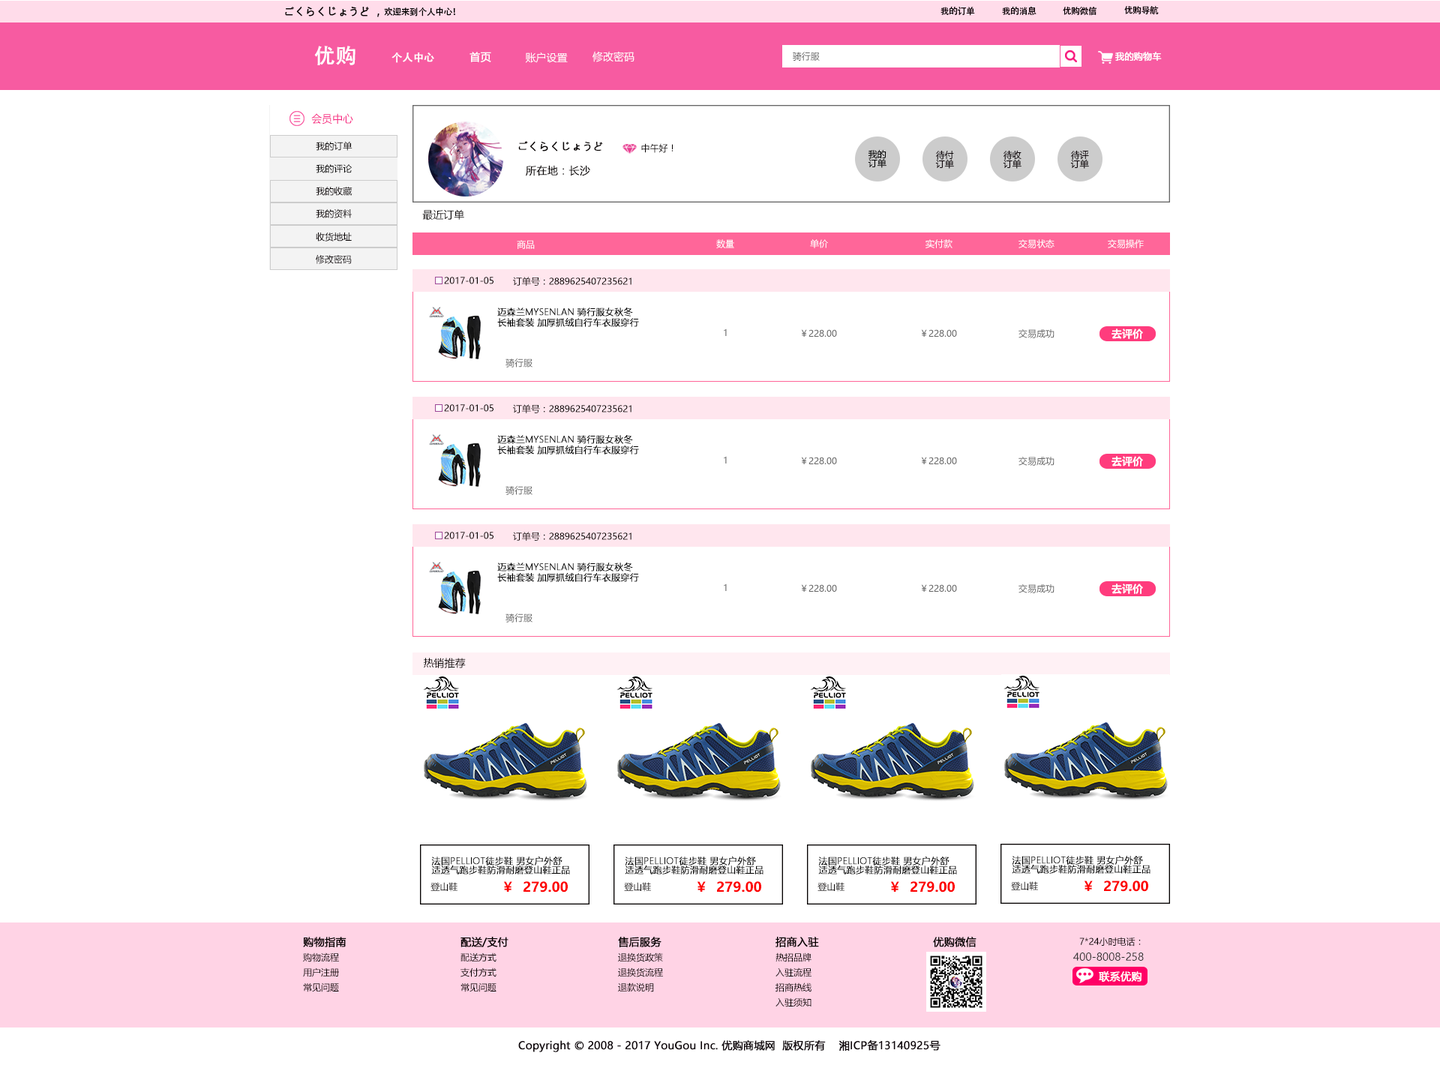
<style>
.page{position:relative;width:1440px;height:1065px;background:#ffffff}
.page>*{position:absolute;margin:0}
.t1{font:8.8px "AdobeHeitiStd-Regular";letter-spacing:-0.025em;color:#000000}
.t2{font:10.5px "MicrosoftYaHei";color:#040000;font-weight:bold}
.t3{font:21px "AdobeHeitiStd-Regular";color:#ffffff;font-weight:bold}
.t4{font:10.5px "AdobeHeitiStd-Regular";color:#ffffff;font-weight:bold}
.t5{font:10.5px "MicrosoftYaHei";color:#ffffff;font-weight:bold}
.t6{font:10.5px "MicrosoftYaHei";color:#ffffff}
.t7{font:9px "MicrosoftYaHei";color:#666666}
.t8{font:9px "MicrosoftYaHei";color:#ffffff;font-weight:bold}
.t9{font:10.5px "MicrosoftYaHei";color:#f72985}
.t10{font:9px "MicrosoftYaHei";color:#040000}
.t11{font:9px/9px "MicrosoftYaHei";color:#000000}
.t12{font:9px/9px "MicrosoftYaHei";color:#0e050a}
.t13{font:9px "MicrosoftYaHei";color:#000000}
.t14{font:10.5px "MicrosoftYaHeiLight";color:#040000;font-weight:bold}
.t15{font:9px "MicrosoftYaHei";color:#060001}
.t16{font:10.5px "MicrosoftYaHei";color:#040000}
.t17{font:9px "MicrosoftYaHei";color:#ffffff}
.t18{font:9px/10.5px "MicrosoftYaHeiLight";color:#000000;font-weight:bold}
.t19{font:9px "MicrosoftYaHei"}
.t20{font:10.5px "MicrosoftYaHei-Bold";color:#ffffff}
.t21{font:9px/9px "MicrosoftYaHeiLight";color:#000000;font-weight:bold}
.t22{font:13.5px "MicrosoftYaHei-Bold";color:#fd0000}
.t23{font:10.5px "MicrosoftYaHei";color:#323333}
.t24{font:10.5px "MicrosoftYaHei";color:#0e050a;font-weight:bold}
</style>
<div class="page">
<p class="t1" style="left:940px;top:6px;width:35px;height:10px">我的订单</p>
<p class="t1" style="left:1002px;top:6px;width:34px;height:9px">我的消息</p>
<p class="t1" style="left:1063px;top:6px;width:33px;height:10px">优购微信</p>
<p class="t1" style="left:1124px;top:6px;width:35px;height:9px">优购导航</p>
<p class="t2" style="left:285px;top:7px;width:170px;height:10px">ごくらくじょうど ，<span class="t1">欢迎来到个人中心！</span></p>
<p class="t3" style="left:314px;top:46px;width:42px;height:19px">优购</p>
<p class="t4" style="left:392px;top:52px;width:42px;height:11px">个人中心</p>
<p class="t5" style="left:470px;top:52px;width:21px;height:10px">首页</p>
<p class="t6" style="left:525px;top:52px;width:43px;height:11px">账户设置</p>
<p class="t6" style="left:592px;top:51px;width:42px;height:11px">修改密码</p>
<p class="t7" style="left:793px;top:52px;width:27px;height:9px">骑行服</p>
<p class="t8" style="left:1115px;top:52px;width:47px;height:10px">我的购物车</p>
<p class="t9" style="left:311px;top:113px;width:42px;height:11px">会员中心</p>
<p class="t10" style="left:316px;top:141px;width:36px;height:10px">我的订单</p>
<p class="t2" style="left:518px;top:141px;width:85px;height:11px">ごくらくじょうど</p>
<p class="t10" style="left:641px;top:143px;width:33px;height:10px">中午好！</p>
<p class="t11" style="left:868px;top:150px;width:18px;height:18px">我的<br>订单</p>
<p class="t11" style="left:935px;top:150px;width:19px;height:19px">待付<br>订单</p>
<p class="t12" style="left:1003px;top:150px;width:19px;height:19px">待收<br>订单</p>
<p class="t12" style="left:1070px;top:150px;width:19px;height:19px">待评<br>订单</p>
<p class="t13" style="left:316px;top:164px;width:36px;height:9px">我的评论</p>
<p class="t14" style="left:526px;top:165px;width:64px;height:11px">所在地：长沙</p>
<p class="t15" style="left:316px;top:187px;width:36px;height:9px">我的收藏</p>
<p class="t15" style="left:316px;top:208px;width:36px;height:10px">我的资料</p>
<p class="t16" style="left:422px;top:209px;width:42px;height:11px">最近订单</p>
<p class="t15" style="left:316px;top:232px;width:36px;height:10px">收货地址</p>
<p class="t17" style="left:517px;top:240px;width:18px;height:9px">商品</p>
<p class="t17" style="left:716px;top:239px;width:18px;height:9px">数量</p>
<p class="t17" style="left:810px;top:239px;width:18px;height:9px">单价</p>
<p class="t17" style="left:926px;top:239px;width:26px;height:9px">实付款</p>
<p class="t17" style="left:1018px;top:239px;width:36px;height:9px">交易状态</p>
<p class="t17" style="left:1108px;top:239px;width:36px;height:9px">交易操作</p>
<p class="t15" style="left:316px;top:255px;width:36px;height:9px">修改密码</p>
<p class="t10" style="left:444px;top:277px;width:50px;height:7px">2017-01-05</p>
<p class="t10" style="left:513px;top:277px;width:119px;height:9px">订单号：2889625407235621</p>
<p class="t18" style="left:497px;top:308px;width:142px;height:19px">迈森兰MYSENLAN 骑行服女秋冬<br>长袖套装 加厚抓绒自行车衣服穿行</p>
<p class="t19" style="left:724px;top:328px;width:3px;height:8px">1</p>
<p class="t7" style="left:801px;top:329px;width:36px;height:8px">￥228.00</p>
<p class="t7" style="left:921px;top:329px;width:36px;height:8px">￥228.00</p>
<p class="t7" style="left:1018px;top:329px;width:36px;height:9px">交易成功</p>
<p class="t20" style="left:1112px;top:328px;width:31px;height:11px">去评价</p>
<p class="t7" style="left:506px;top:358px;width:26px;height:10px">骑行服</p>
<p class="t10" style="left:444px;top:404px;width:50px;height:8px">2017-01-05</p>
<p class="t10" style="left:513px;top:404px;width:119px;height:9px">订单号：2889625407235621</p>
<p class="t18" style="left:497px;top:435px;width:142px;height:19px">迈森兰MYSENLAN 骑行服女秋冬<br>长袖套装 加厚抓绒自行车衣服穿行</p>
<p class="t19" style="left:724px;top:456px;width:3px;height:8px">1</p>
<p class="t7" style="left:801px;top:457px;width:36px;height:7px">￥228.00</p>
<p class="t7" style="left:921px;top:457px;width:36px;height:7px">￥228.00</p>
<p class="t7" style="left:1018px;top:457px;width:36px;height:9px">交易成功</p>
<p class="t20" style="left:1112px;top:456px;width:31px;height:10px">去评价</p>
<p class="t7" style="left:506px;top:485px;width:26px;height:10px">骑行服</p>
<p class="t10" style="left:444px;top:532px;width:50px;height:7px">2017-01-05</p>
<p class="t10" style="left:513px;top:532px;width:119px;height:9px">订单号：2889625407235621</p>
<p class="t18" style="left:497px;top:562px;width:142px;height:20px">迈森兰MYSENLAN 骑行服女秋冬<br>长袖套装 加厚抓绒自行车衣服穿行</p>
<p class="t19" style="left:724px;top:584px;width:3px;height:7px">1</p>
<p class="t7" style="left:801px;top:584px;width:36px;height:8px">￥228.00</p>
<p class="t7" style="left:921px;top:584px;width:36px;height:8px">￥228.00</p>
<p class="t7" style="left:1018px;top:584px;width:36px;height:9px">交易成功</p>
<p class="t20" style="left:1112px;top:584px;width:31px;height:10px">去评价</p>
<p class="t7" style="left:506px;top:613px;width:26px;height:9px">骑行服</p>
<p class="t16" style="left:424px;top:658px;width:42px;height:10px">热销推荐</p>
<p class="t21" style="left:431px;top:856px;width:139px;height:18px">法国PELLIOT徒步鞋 男女户外舒<br>适透气跑步鞋防滑耐磨登山鞋正品</p>
<p class="t21" style="left:625px;top:856px;width:139px;height:18px">法国PELLIOT徒步鞋 男女户外舒<br>适透气跑步鞋防滑耐磨登山鞋正品</p>
<p class="t21" style="left:818px;top:856px;width:139px;height:18px">法国PELLIOT徒步鞋 男女户外舒<br>适透气跑步鞋防滑耐磨登山鞋正品</p>
<p class="t21" style="left:1012px;top:856px;width:138px;height:18px">法国PELLIOT徒步鞋 男女户外舒<br>适透气跑步鞋防滑耐磨登山鞋正品</p>
<p class="t22" style="left:503px;top:881px;width:65px;height:11px">￥  279.00</p>
<p class="t22" style="left:697px;top:881px;width:64px;height:11px">￥  279.00</p>
<p class="t22" style="left:890px;top:881px;width:65px;height:11px">￥  279.00</p>
<p class="t10" style="left:1011px;top:881px;width:27px;height:10px">登山鞋</p>
<p class="t22" style="left:1084px;top:880px;width:64px;height:12px">￥  279.00</p>
<p class="t10" style="left:430px;top:882px;width:28px;height:10px">登山鞋</p>
<p class="t10" style="left:624px;top:882px;width:27px;height:10px">登山鞋</p>
<p class="t10" style="left:818px;top:882px;width:26px;height:10px">登山鞋</p>
<p class="t2" style="left:303px;top:937px;width:43px;height:10px">购物指南</p>
<p class="t2" style="left:460px;top:937px;width:48px;height:10px">配送/支付</p>
<p class="t2" style="left:618px;top:937px;width:44px;height:10px">售后服务</p>
<p class="t2" style="left:776px;top:937px;width:43px;height:10px">招商入驻</p>
<p class="t2" style="left:933px;top:937px;width:43px;height:10px">优购微信</p>
<p class="t10" style="left:1079px;top:937px;width:62px;height:9px">7*24小时电话：</p>
<p class="t10" style="left:303px;top:952px;width:36px;height:10px">购物流程</p>
<p class="t10" style="left:460px;top:952px;width:36px;height:10px">配送方式</p>
<p class="t10" style="left:618px;top:952px;width:45px;height:10px">退换货政策</p>
<p class="t10" style="left:776px;top:952px;width:36px;height:10px">热招品牌</p>
<p class="t23" style="left:1073px;top:952px;width:71px;height:9px">400-8008-258</p>
<p class="t10" style="left:303px;top:968px;width:36px;height:9px">用户注册</p>
<p class="t10" style="left:460px;top:968px;width:36px;height:9px">支付方式</p>
<p class="t10" style="left:618px;top:968px;width:45px;height:9px">退换货流程</p>
<p class="t10" style="left:776px;top:968px;width:36px;height:9px">入驻流程</p>
<p class="t5" style="left:1099px;top:971px;width:43px;height:11px">联系优购</p>
<p class="t10" style="left:303px;top:982px;width:36px;height:10px">常见问题</p>
<p class="t10" style="left:460px;top:982px;width:36px;height:10px">常见问题</p>
<p class="t10" style="left:618px;top:982px;width:36px;height:10px">退款说明</p>
<p class="t10" style="left:776px;top:982px;width:36px;height:10px">招商热线</p>
<p class="t10" style="left:776px;top:998px;width:36px;height:9px">入驻须知</p>
<p class="t24" style="left:518px;top:1040px;width:422px;height:12px">Copyright © 2008 - 2017 YouGou Inc. 优购商城网  版权所有    湘ICP备13140925号</p>
</div>
